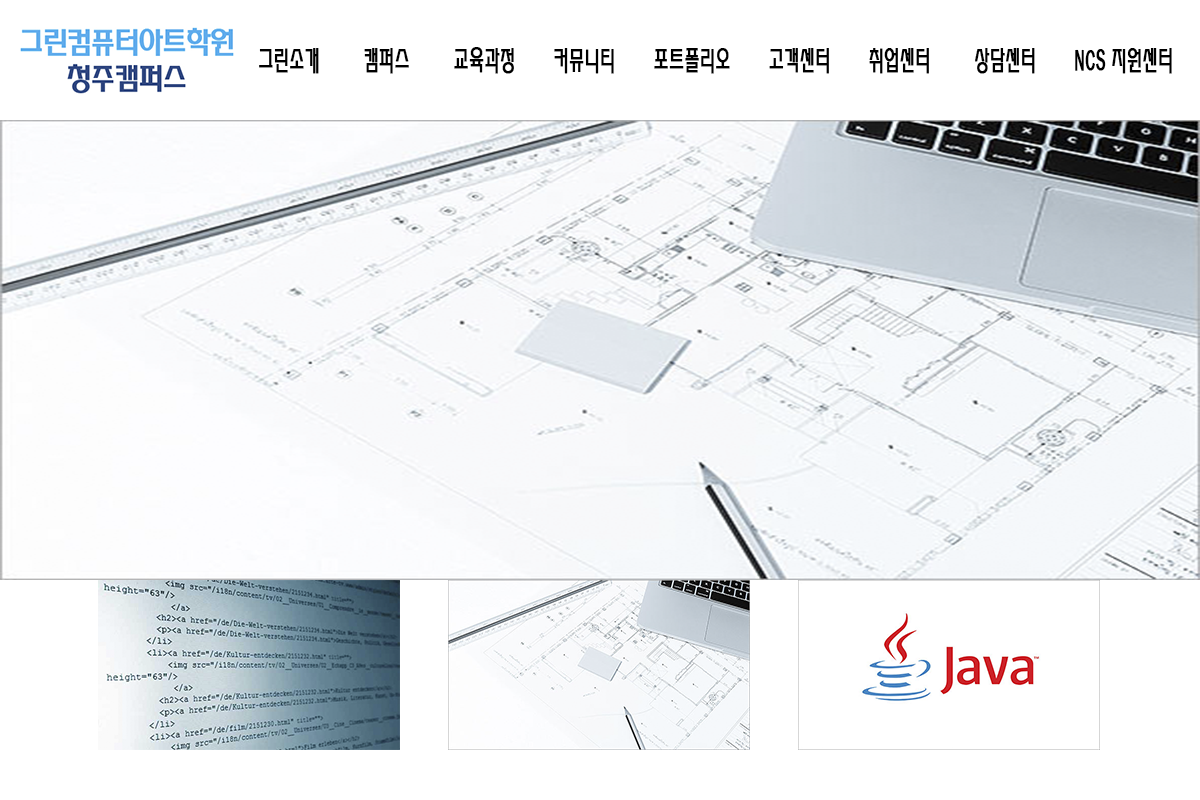
<style>
.page{position:relative;width:1200px;height:800px;background:#ffffff}
.page>*{position:absolute;margin:0}
.t1{font:29px "HYsupM";color:#000000;font-weight:bold;scale:0.52 1}
</style>
<div class="page">
<p class="t1" style="left:259px;top:47px;width:913px;height:27px">그린소개        캠퍼스        교육과정       커뮤니티       포트폴리오       고객센터       취업센터        상담센터       NCS 지원센터</p>
</div>
